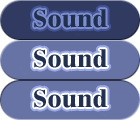
<style>
.page{position:relative;width:140px;height:120px;background:#6773a4}
.page>*{position:absolute;margin:0}
.t1{font:36px "TFPimpakarnExtra";color:#21304e}
</style>
<div class="page">
<p class="t1" style="left:34px;top:9px;width:74px;height:19px">Sound</p>
<p class="t1" style="left:34px;top:9px;width:74px;height:19px">Sound</p>
<p class="t1" style="left:34px;top:49px;width:74px;height:19px">Sound</p>
<p class="t1" style="left:34px;top:49px;width:74px;height:19px">Sound</p>
<p class="t1" style="left:34px;top:89px;width:74px;height:19px">Sound</p>
<p class="t1" style="left:34px;top:89px;width:74px;height:19px">Sound</p>
</div>
